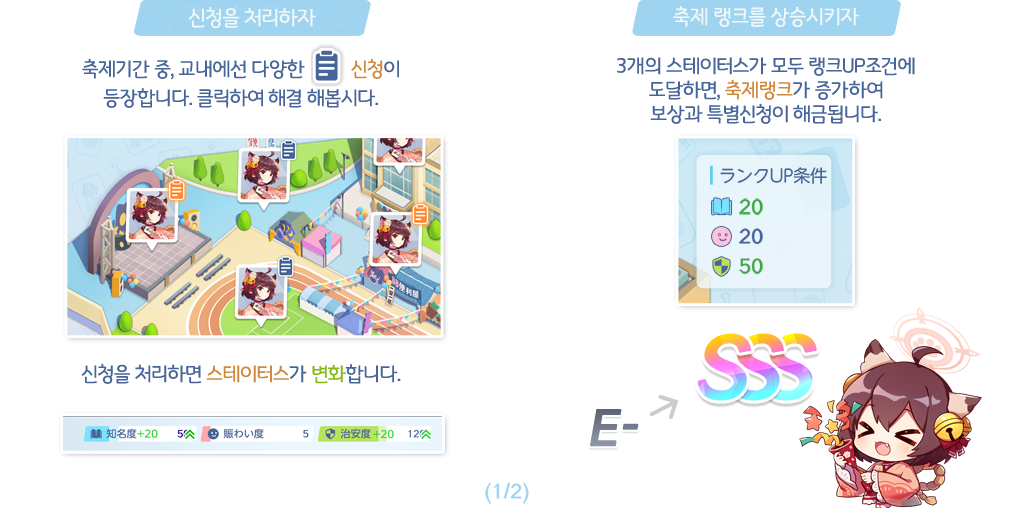
<style>
.page{position:relative;width:1024px;height:508px;background:#ffffff}
.page>*{position:absolute;margin:0}
.t1{font:22px "GyeonggiTitleL";letter-spacing:-0.049em;color:#f2f8f8}
.t2{font:21px/29px "GyeonggiTitleL";letter-spacing:-0.049em;color:#476598}
.t3{font:21px/29px "GyeonggiTitleL";letter-spacing:-0.049em;color:#d0893c}
.t4{font:21px/24px "GyeonggiTitleL";letter-spacing:-0.049em;color:#476598}
.t5{font:21px/24px "GyeonggiTitleL";letter-spacing:-0.049em;color:#d0893c}
.t6{font:21px "GyeonggiTitleL";letter-spacing:-0.049em;color:#476598}
.t7{font:21px "GyeonggiTitleL";letter-spacing:-0.049em;color:#d0893c}
.t8{font:21px "GyeonggiTitleL";letter-spacing:-0.049em;color:#87b81c}
</style>
<div class="page">
<p class="t1" style="left:673px;top:6px;width:186px;height:22px">축제 랭크를 상승시키자</p>
<p class="t1" style="left:188px;top:7px;width:128px;height:22px">신청을 처리하자</p>
<p class="t2" style="left:82px;top:58px;width:317px;height:50px;text-align:center">축제기간 중, 교내에선 다양한          <span class="t3">신청</span>이<br>등장합니다. 클릭하여 해결 해봅시다.</p>
<p class="t4" style="left:617px;top:57px;width:298px;height:67px;text-align:center">3개의 스테이터스가 모두 랭크UP조건에<br>도달하면, <span class="t5">축제랭크</span>가 증가하여<br>보상과 특별신청이 해금됩니다.</p>
<p class="t6" style="left:81px;top:363px;width:320px;height:21px">신청을 처리하면 <span class="t7">스테이터스</span>가 <span class="t8">변화</span>합니다.</p>
</div>
